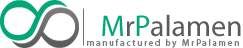
<style>
.page{position:relative;width:243px;height:48px;background:#ffffff}
.page>*{position:absolute;margin:0}
.t1{font:30px "MyriadPro-Regular";color:#5b5b5b}
.t2{font:30px "MyriadPro-Regular";color:#03a678}
.t3{font:9px "MyriadPro-Regular";letter-spacing:0.2em;color:#767676}
</style>
<div class="page">
<p class="t1" style="left:102px;top:14px;width:139px;height:23px"><span class="t2">M</span>r<span class="t2">P</span>alamen</p>
<p class="t3" style="left:87px;top:39px;width:152px;height:9px">manufactured by MrPalamen</p>
</div>
